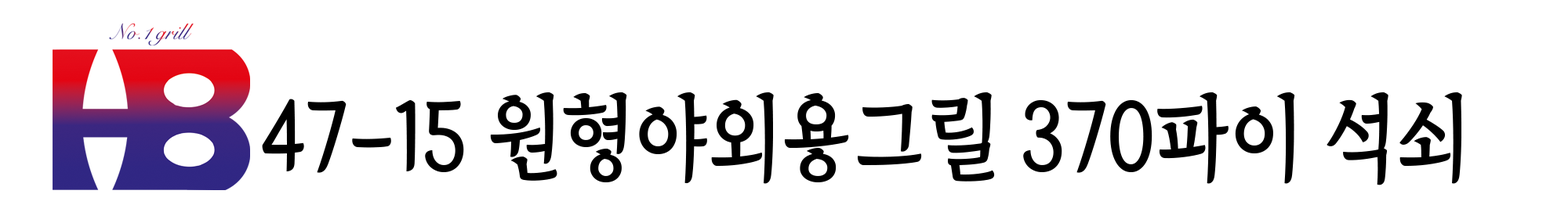
<style>
.page{position:relative;width:1568px;height:205px;background:#ffffff}
.page>*{position:absolute;margin:0}
.t1{font:93.7px "TheIndependenceHallofKorea-Regular";color:#000000;scale:0.89 1}
</style>
<div class="page">
<p class="t1" style="left:262px;top:93px;width:1200px;height:93px">47-15 원형야외용그릴 370파이 석쇠</p>
</div>
